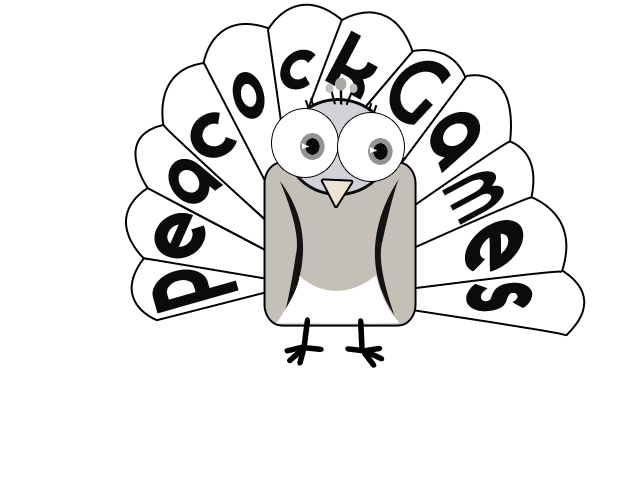
<style>
.page{position:relative;width:640px;height:480px;background:#ffffff}
.page>*{position:absolute;margin:0}
.t1{font:71.5px "Moderna";color:#0b0b0b;scale:1.16 1}
.t2{font:76.2px "Moderna";color:#0b0b0b;scale:0.93 1}
.t3{font:87.6px "Moderna";color:#0b0b0b;scale:0.8 1}
.t4{font:89.1px "Moderna";color:#0b0b0b;scale:0.64 1}
.t5{font:84.6px "Moderna";color:#0b0b0b;scale:1.05 1}
.t6{font:101px "Moderna";color:#0b0b0b;scale:0.75 1}
.t7{font:89px "Moderna";color:#0b0b0b;scale:0.79 1}
.t8{font:104.3px "Moderna";color:#0b0b0b;scale:0.41 1}
.t9{font:91.7px "Moderna";color:#0b0b0b;scale:0.97 1}
.t10{font:116.7px "Moderna";color:#0b0b0b;scale:0.75 1}
.t11{font:106.2px "Moderna";color:#0b0b0b;scale:0.69 1}
.t12{font:124.6px "Moderna";color:#0b0b0b;scale:0.55 1}
</style>
<div class="page">
<p class="t1" style="left:325px;top:30px;width:53px;height:70px;rotate:28deg">k</p>
<p class="t2" style="left:280px;top:49px;width:36px;height:41px;rotate:1deg">c</p>
<p class="t3" style="left:389px;top:60px;width:62px;height:65px;rotate:43deg">G</p>
<p class="t4" style="left:232px;top:72px;width:33px;height:47px;rotate:-15deg">o</p>
<p class="t5" style="left:190px;top:112px;width:47px;height:46px;rotate:-29deg">c</p>
<p class="t6" style="left:430px;top:111px;width:51px;height:63px;rotate:71deg">a</p>
<p class="t7" style="left:168px;top:159px;width:56px;height:45px;rotate:-34deg">a</p>
<p class="t8" style="left:442px;top:171px;width:62px;height:54px;rotate:62deg">m</p>
<p class="t9" style="left:154px;top:213px;width:52px;height:46px;rotate:-66deg">e</p>
<p class="t10" style="left:465px;top:220px;width:59px;height:52px;rotate:89deg">e</p>
<p class="t11" style="left:152px;top:269px;width:87px;height:45px;rotate:-106deg">P</p>
<p class="t12" style="left:466px;top:282px;width:67px;height:30px;rotate:91deg">s</p>
</div>
